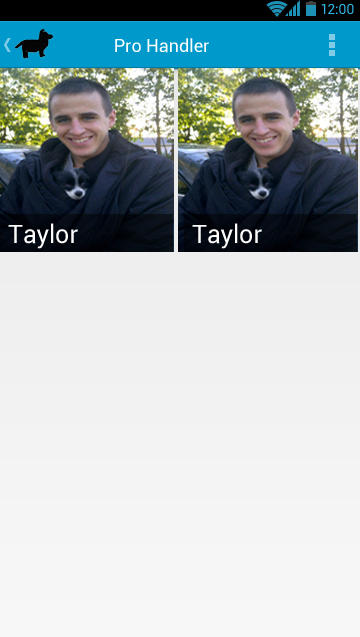
<style>
.page{position:relative;width:360px;height:637px}
.page>*{position:absolute;margin:0}
.t1{font:14px "Roboto-Regular";color:#33b5e5}
.t2{font:18px "Roboto-Regular";color:#ffffff}
.t3{font:25.5px "Roboto-Regular";color:#fcfbfb}
</style>
<div class="page">
<p class="t1" style="left:321px;top:4px;width:33px;height:10px">12:00</p>
<p class="t2" style="left:115px;top:38px;width:94px;height:15px">Pro Handler</p>
<p class="t3" style="left:8px;top:223px;width:70px;height:26px">Taylor</p>
<p class="t3" style="left:192px;top:223px;width:70px;height:26px">Taylor</p>
</div>
